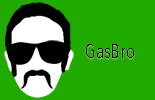
<style>
.page{position:relative;width:155px;height:100px;background:#21aa00}
.page>*{position:absolute;margin:0}
.t1{font:20px "AvenirNextCondensed-Regular";color:#000000}
</style>
<div class="page">
<p class="t1" style="left:86px;top:44px;width:48px;height:14px">GasBro</p>
</div>
